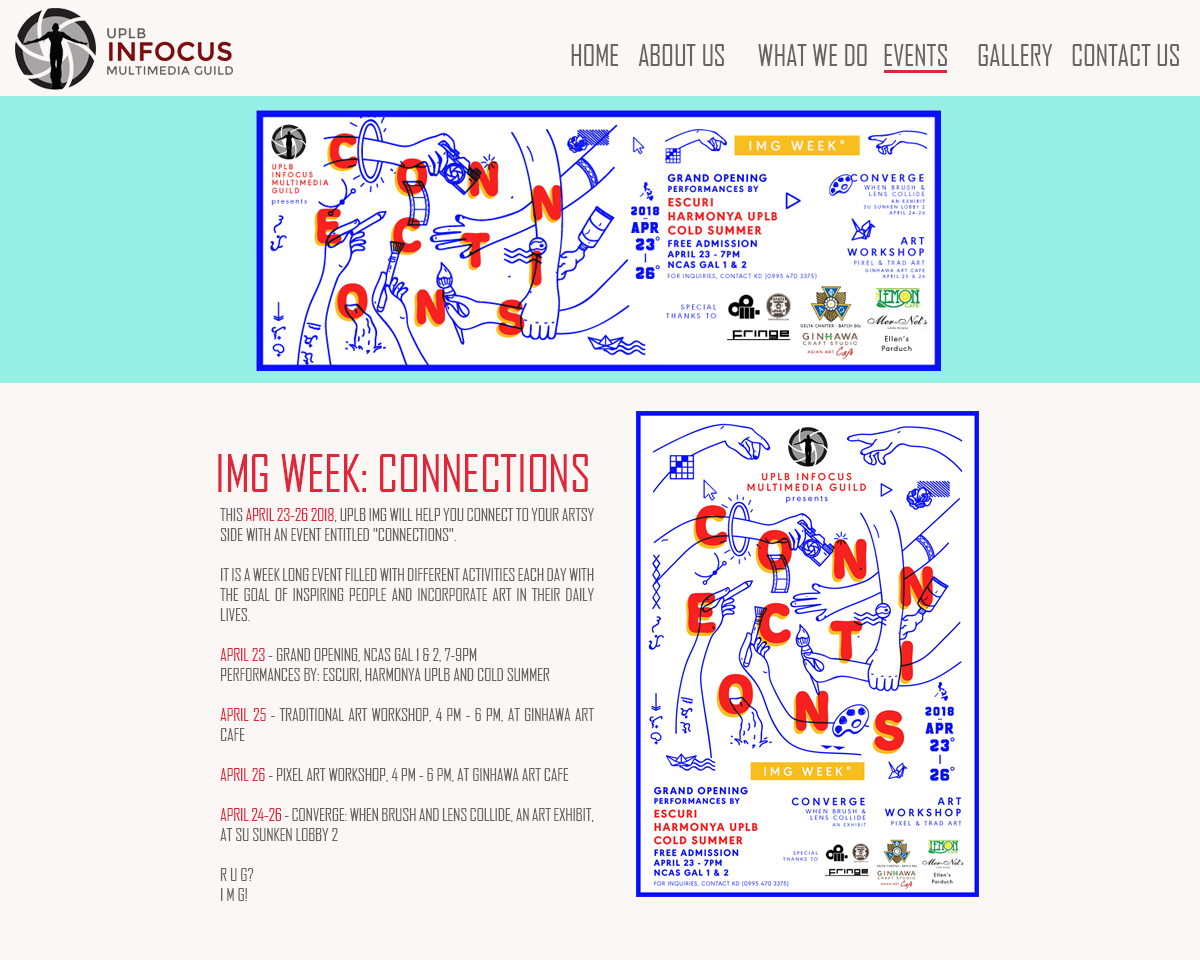
<style>
.page{position:relative;width:1200px;height:960px;background:#fbf7f5}
.page>*{position:absolute;margin:0}
.t1{font:29.3px "AgencyFB-Reg";letter-spacing:-0.01em;color:#676465;text-transform:uppercase}
.t2{font:50px "AgencyFB-Reg";letter-spacing:-0.01em;color:#df263b;text-transform:uppercase}
.t3{font:16.7px "AgencyFB-Reg";letter-spacing:-0.01em;color:#676465;text-transform:uppercase}
.t4{font:16.7px "AgencyFB-Reg";letter-spacing:-0.01em;color:#df263b;text-transform:uppercase}
</style>
<div class="page">
<p class="t1" style="left:571px;top:44px;width:608px;height:22px">home   about us  what we do  events gallery contact us</p>
<p class="t2" style="left:218px;top:454px;width:370px;height:38px">IMG WEEk: Connections</p>
<p class="t3" style="left:220px;top:508px;width:374px;height:393px;text-align:justify">This <span class="t4">April 23-26 2018</span>, UPLB IMG will help you connect to your artsy side with an event entitled "CONNECTIONS".<br><br>It is a week long event filled with different activities each day with the goal of inspiring people and incorporate art in their daily lives.<br><br><span class="t4">APRIL 23 </span>- Grand Opening, NCAS Gal 1 &amp; 2, 7-9pm<br>Performances by: Escuri, Harmonya Uplb and Cold Summer<br><br><span class="t4">APRIL 25</span> - Traditional Art Workshop, 4 PM - 6 PM, at Ginhawa Art Cafe<br><br><span class="t4">APRIL 26 </span>- Pixel Art Workshop, 4 PM - 6 PM, at Ginhawa Art Cafe<br><br><span class="t4">APRIL 24-26 </span>- CONVERGE: When brush and lens collide, an art exhibit, at SU Sunken Lobby 2<br><br>R U G?<br>I M G!</p>
</div>
